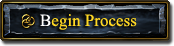
<style>
.page{position:relative;width:174px;height:46px}
.page>*{position:absolute;margin:0}
.t1{font:17px "TimesNewRomanPSMT";color:#ffd823}
.t2{font:17px "TimesNewRomanPSMT";color:#ffffff}
</style>
<div class="page">
<p class="t1" style="left:40px;top:14px;width:97px;height:16px"><span class="t2">B</span>egin Process</p>
</div>
